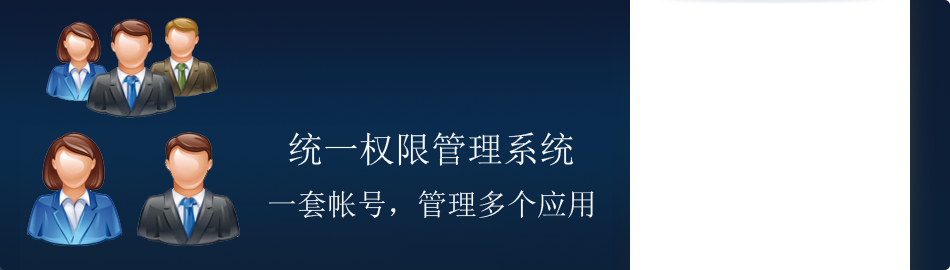
<style>
.page{position:relative;width:950px;height:270px;background:#ffffff}
.page>*{position:absolute;margin:0}
.t1{font:36px "SimSun";color:#f7f8fa}
.t2{font:30px "SimSun";color:#f7f8fa}
</style>
<div class="page">
<p class="t1" style="left:289px;top:132px;width:285px;height:34px">统一权限管理系统</p>
<p class="t2" style="left:268px;top:190px;width:326px;height:28px">一套帐号，管理多个应用</p>
</div>
